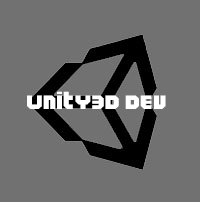
<style>
.page{position:relative;width:200px;height:202px;background:#717171}
.page>*{position:absolute;margin:0}
.t1{font:18px "Twitchy.TV";color:#ffffff}
</style>
<div class="page">
<p class="t1" style="left:27px;top:91px;width:139px;height:18px">Unity3D dev</p>
</div>
